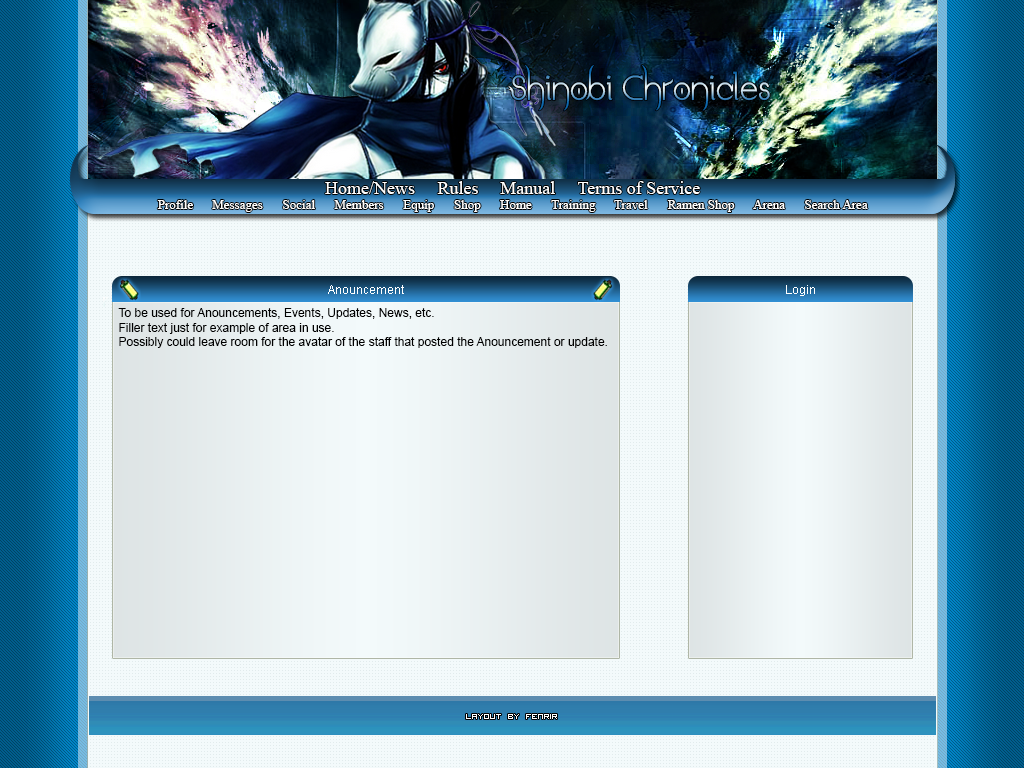
<style>
.page{position:relative;width:1024px;height:768px;background:#f3fafb}
.page>*{position:absolute;margin:0}
.t1{font:18px "TimesNewRomanPSMT";color:#ffffff}
.t2{font:13px "TimesNewRomanPSMT";color:#ffffff}
.t3{font:12px "ArialMT";color:#ffffff}
.t4{font:12px "ArialMT";color:#000000}
.t5{font:14px "Visitor -BRK-";color:#ffffff}
</style>
<div class="page">
<p class="t1" style="left:325px;top:181px;width:90px;height:13px">Home/News</p>
<p class="t1" style="left:437px;top:181px;width:41px;height:13px">Rules</p>
<p class="t1" style="left:500px;top:181px;width:55px;height:13px">Manual</p>
<p class="t1" style="left:577px;top:181px;width:123px;height:13px">Terms of Service</p>
<p class="t2" style="left:157px;top:200px;width:36px;height:9px">Profile</p>
<p class="t2" style="left:212px;top:200px;width:51px;height:12px">Messages</p>
<p class="t2" style="left:283px;top:200px;width:32px;height:9px">Social</p>
<p class="t2" style="left:334px;top:200px;width:50px;height:9px">Members</p>
<p class="t2" style="left:403px;top:200px;width:31px;height:12px">Equip</p>
<p class="t2" style="left:454px;top:200px;width:27px;height:12px">Shop</p>
<p class="t2" style="left:500px;top:200px;width:32px;height:9px">Home</p>
<p class="t2" style="left:551px;top:200px;width:45px;height:12px">Training</p>
<p class="t2" style="left:614px;top:200px;width:34px;height:9px">Travel</p>
<p class="t2" style="left:667px;top:200px;width:68px;height:12px">Ramen Shop</p>
<p class="t2" style="left:753px;top:200px;width:32px;height:9px">Arena</p>
<p class="t2" style="left:805px;top:200px;width:63px;height:9px">Search Area</p>
<p class="t3" style="left:328px;top:285px;width:76px;height:9px">Anouncement</p>
<p class="t3" style="left:786px;top:285px;width:29px;height:11px">Login</p>
<p class="t4" style="left:118px;top:308px;width:489px;height:40px">To be used for Anouncements, Events, Updates, News, etc.<br>Filler text just for example of area in use.<br>Possibly could leave room for the avatar of the staff that posted the Anouncement or update.</p>
<p class="t5" style="left:466px;top:714px;width:91px;height:5px">Layout by fenrir</p>
</div>
